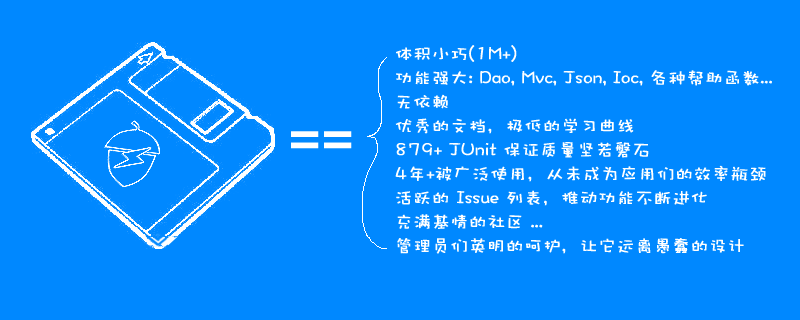
<style>
.page{position:relative;width:800px;height:320px;background:#0088ff}
.page>*{position:absolute;margin:0}
.t1{font:18px/24px "DFWaWaSC-W5";color:#ffffff;font-weight:bold}
.t2{font:48px "AbadiMT-CondensedExtraBold";color:#ffffff;font-weight:bold}
</style>
<div class="page">
<p class="t1" style="left:395px;top:45px;width:377px;height:209px">体积小巧(1M+)<br>功能强大: Dao, Mvc, Json, Ioc, 各种帮助函数...<br>无依赖<br>优秀的文档，极低的学习曲线<br>879+ JUnit 保证质量坚若磐石<br>4年+被广泛使用，从未成为应用们的效率瓶颈<br>活跃的 Issue 列表，推动功能不断进化<br>充满基情的社区 ...<br>管理员们英明的呵护，让它远离愚蠢的设计</p>
<p class="t2" style="left:291px;top:131px;width:61px;height:18px">==</p>
</div>
